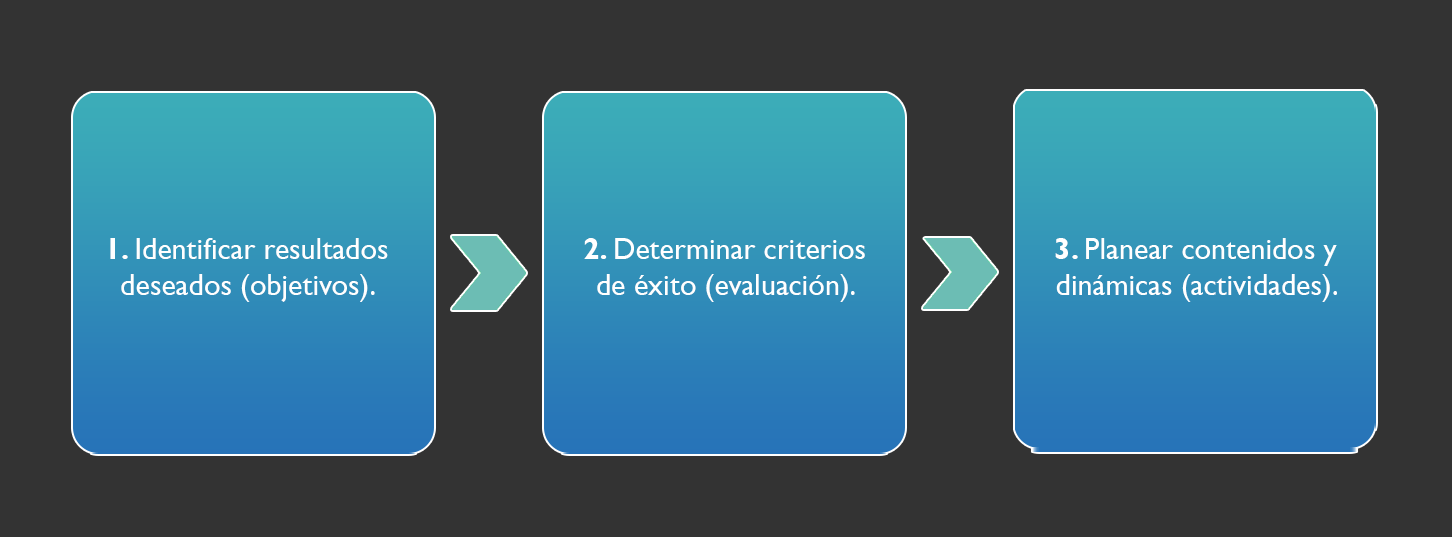
<style>
.page{position:relative;width:1452px;height:537px;background:#333333}
.page>*{position:absolute;margin:0}
.t1{font:30px "GillSansMT";color:#ffffff}
.t2{font:30px "GillSansMT-Bold";color:#ffffff}
</style>
<div class="page">
<p class="t1" style="left:110px;top:238px;width:278px;height:64px;text-align:center"><span class="t2">1. </span>Identificar resultados deseados (objetivos).</p>
<p class="t1" style="left:584px;top:238px;width:281px;height:64px;text-align:center"><span class="t2">2. </span>Determinar criterios de éxito (evaluación).</p>
<p class="t1" style="left:1055px;top:238px;width:282px;height:64px;text-align:center"><span class="t2">3. </span>Planear contenidos y dinámicas (actividades).</p>
</div>
